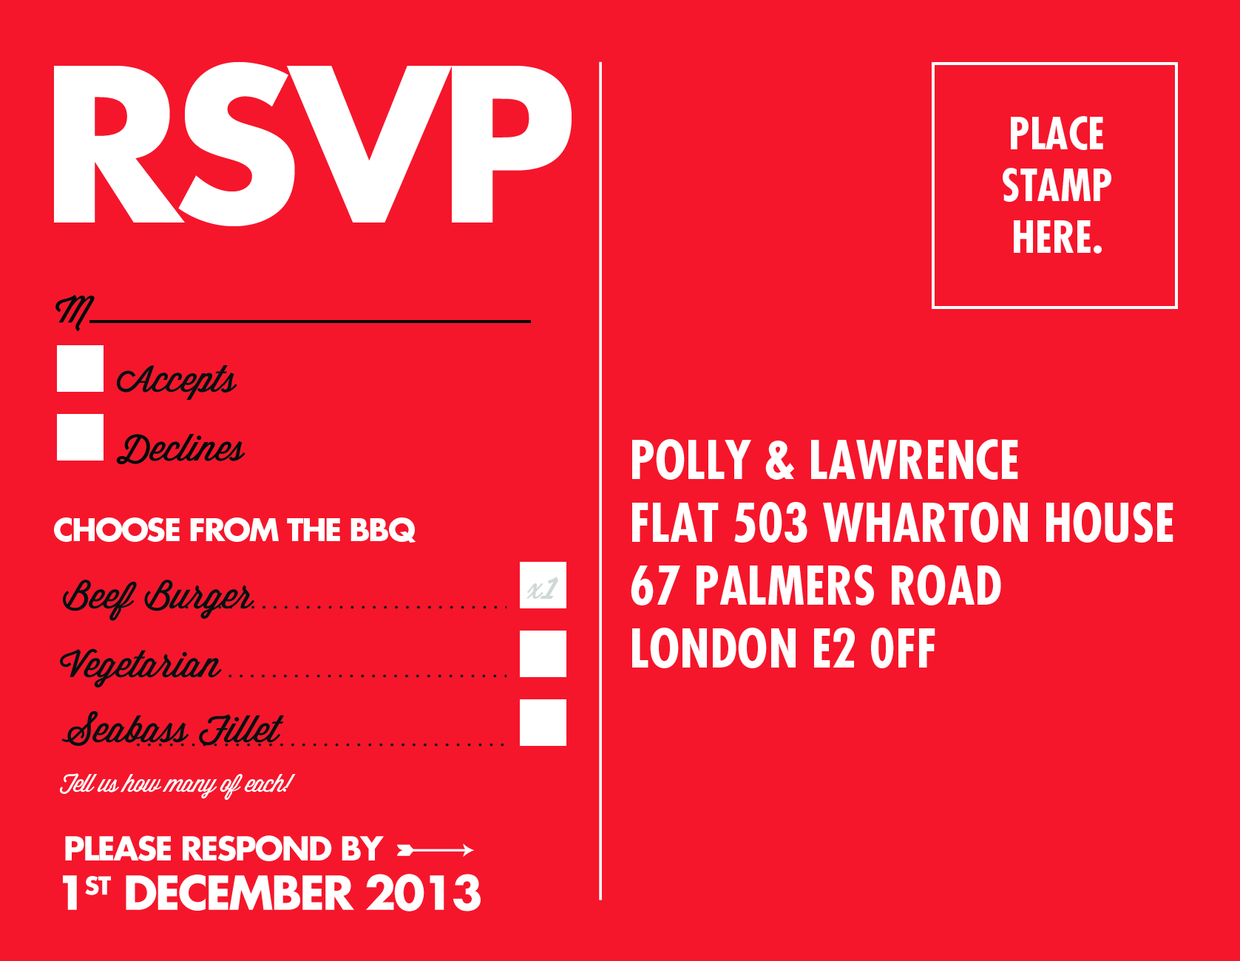
<style>
.page{position:relative;width:1240px;height:961px;background:#f5162b}
.page>*{position:absolute;margin:0}
.t1{font:208.4px "FuturaStd-Bold";letter-spacing:-0.05em;color:#ffffff}
.t2{font:43.1px "FuturaStd-CondensedBold";color:#ffffff}
.t3{font:37px "WisdomScriptAI";color:#060808}
.t4{font:37px "WisdomScriptAI";color:#0b0e0f}
.t5{font:52.4px "FuturaStd-CondensedBold";color:#ffffff}
.t6{font:30.8px "FuturaStd-Bold";letter-spacing:-0.05em;color:#ffffff}
.t7{font:30.8px "WisdomScriptAI";letter-spacing:0.05em;color:#ced9d7}
.t8{font:43.1px "WisdomScriptAI";letter-spacing:0.05em;color:#ced9d7}
.t9{font:24.7px "WisdomScriptAI";letter-spacing:-0.05em;color:#ffffff}
.t10{font:32.1px "FuturaStd-Bold";letter-spacing:-0.05em;color:#ffffff}
.t11{font:45.6px "FuturaStd-Bold";letter-spacing:-0.05em;color:#ffffff}
.t12{font:24.2px "FuturaStd-Bold";letter-spacing:-0.05em;color:#ffffff}
</style>
<div class="page">
<p class="t1" style="left:54px;top:61px;width:518px;height:165px">RSVP</p>
<p class="t2" style="left:1003px;top:116px;width:109px;height:138px;text-align:center">PLACE<br>STAMP<br>HERE.</p>
<p class="t3" style="left:55px;top:294px;width:40px;height:38px">M</p>
<p class="t4" style="left:117px;top:365px;width:120px;height:35px">Accepts</p>
<p class="t3" style="left:116px;top:434px;width:130px;height:30px">Declines</p>
<p class="t5" style="left:631px;top:439px;width:543px;height:230px">POLLY &amp; LAWRENCE<br>FLAT 503 WHARTON HOUSE<br>67 PALMERS ROAD<br>LONDON E2 0FF</p>
<p class="t6" style="left:54px;top:518px;width:362px;height:26px">CHOOSE FROM THE BBQ</p>
<p class="t4" style="left:63px;top:580px;width:191px;height:41px">Beef Burger</p>
<p class="t7" style="left:527px;top:577px;width:32px;height:22px">x<span class="t8">1</span></p>
<p class="t4" style="left:60px;top:649px;width:162px;height:39px">Vegetarian</p>
<p class="t4" style="left:61px;top:711px;width:223px;height:35px">Seabass Fillet</p>
<p class="t9" style="left:60px;top:774px;width:236px;height:26px">Tell us how many of each!</p>
<p class="t10" style="left:65px;top:836px;width:319px;height:26px">PLEASE RESPOND BY</p>
<p class="t11" style="left:63px;top:874px;width:418px;height:38px">1<span class="t12">ST</span> DECEMBER 2013</p>
</div>
